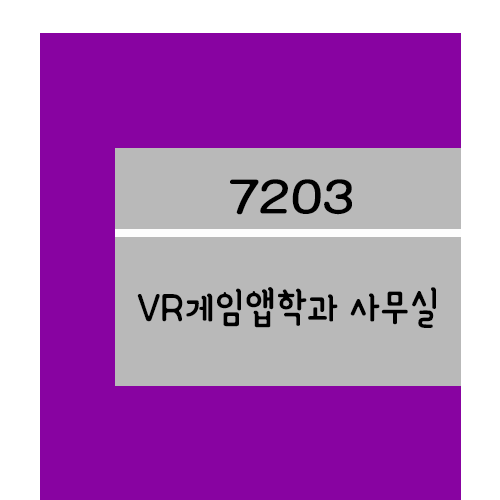
<style>
.page{position:relative;width:500px;height:500px;background:#8803a1}
.page>*{position:absolute;margin:0}
.t1{font:61.2px "YanoljaYacheR";color:#000000;scale:1.18 1}
.t2{font:48px "YanoljaYacheR";color:#000000}
</style>
<div class="page">
<p class="t1" style="left:230px;top:179px;width:122px;height:36px">7203</p>
<p class="t2" style="left:137px;top:287px;width:299px;height:41px">VR게임앱학과 사무실</p>
</div>
